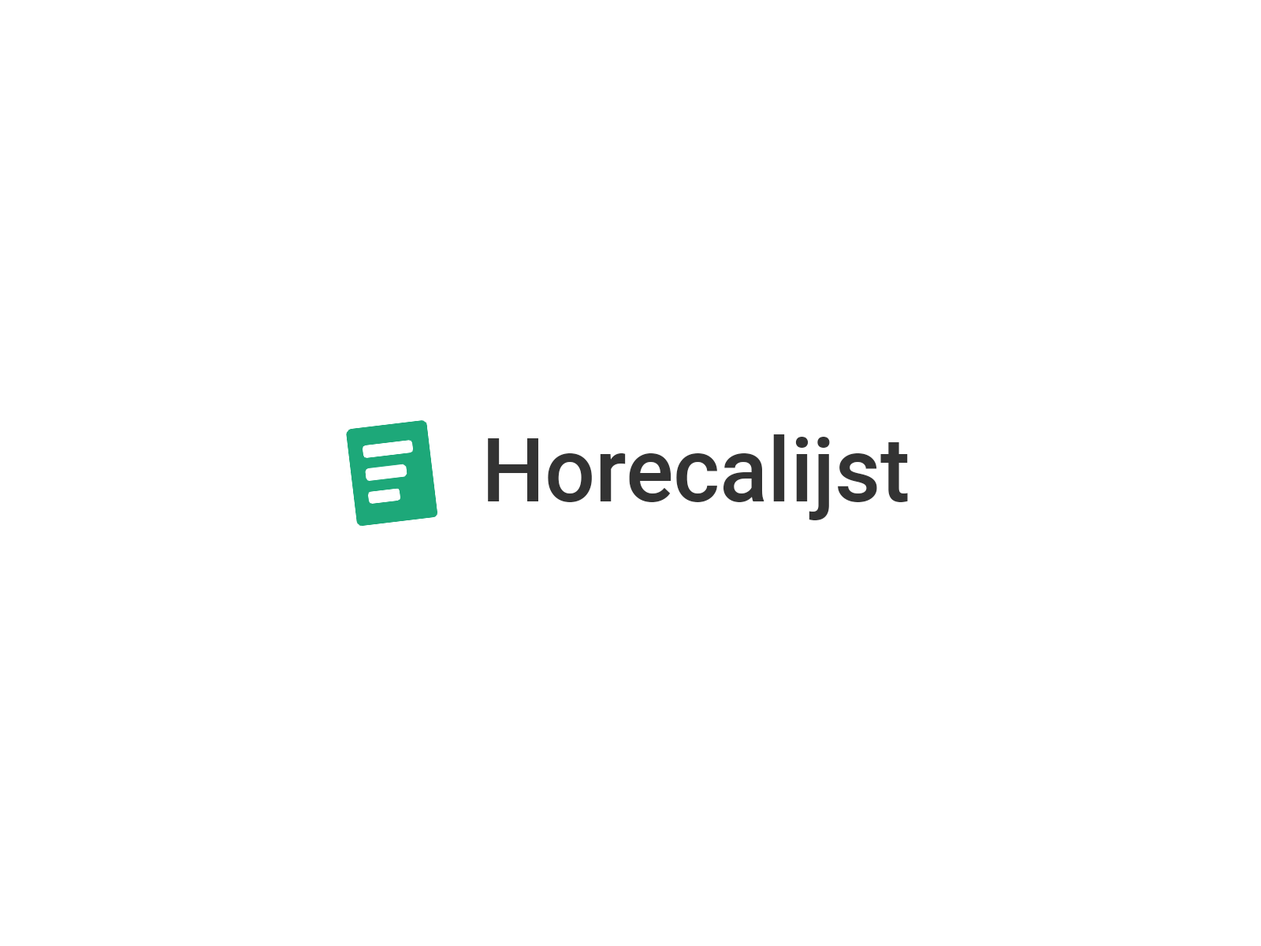
<style>
.page{position:relative;width:1261px;height:946px;background:#ffffff}
.page>*{position:absolute;margin:0}
.t1{font:88.7px "Roboto-Medium";color:#333333}
</style>
<div class="page">
<p class="t1" style="left:488px;top:434px;width:420px;height:86px">Horecalijst</p>
</div>
